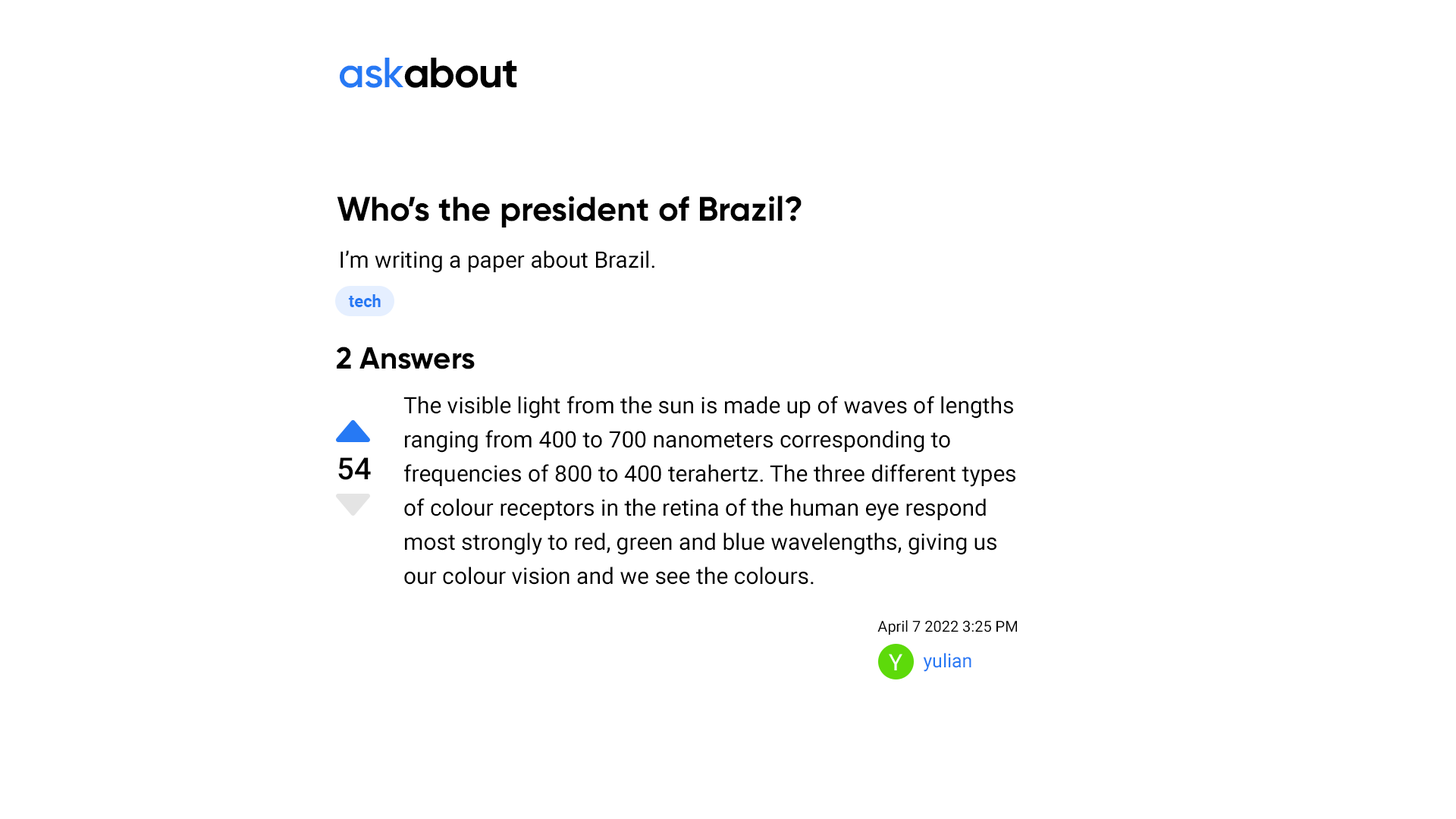
<style>
.page{position:relative;width:1456px;height:819px;background:#ffffff}
.page>*{position:absolute;margin:0}
.t1{font:42.2px "Gilroy-Bold";letter-spacing:-0.02em;color:#000000}
.t2{font:42.2px "Gilroy-Semibold";letter-spacing:-0.02em;color:#2679f4}
.t3{font:34.1px "Gilroy-Bold";color:#000000}
.t4{font:22.7px "Roboto-Regular";color:#000000}
.t5{font:16.7px "Roboto-Bold";color:#2679f4}
.t6{font:30.3px "Gilroy-Bold";color:#000000}
.t7{font:22.7px/34.1px "Roboto-Regular";color:#000000}
.t8{font:30.3px "Roboto-Medium";color:#000000}
.t9{font:15.2px "Roboto-Regular";color:#000000}
.t10{font:22.7px "Roboto-Regular";color:#ffffff}
.t11{font:19px "Roboto-Regular";color:#2679f4}
</style>
<div class="page">
<p class="t1" style="left:340px;top:58px;width:177px;height:30px"><span class="t2">ask</span>about</p>
<p class="t3" style="left:337px;top:196px;width:465px;height:31px">Who’s the president of Brazil?</p>
<p class="t4" style="left:340px;top:250px;width:314px;height:23px">I’m writing a paper about Brazil.</p>
<p class="t5" style="left:348px;top:294px;width:33px;height:13px">tech</p>
<p class="t6" style="left:337px;top:347px;width:138px;height:22px">2 Answers</p>
<p class="t7" style="left:403px;top:396px;width:612px;height:189px">The visible light from the sun is made up of waves of lengths ranging from 400 to 700 nanometers corresponding to frequencies of 800 to 400 terahertz. The three different types of colour receptors in the retina of the human eye respond most strongly to red, green and blue wavelengths, giving us our colour vision and we see the colours.</p>
<p class="t8" style="left:338px;top:457px;width:33px;height:23px">54</p>
<p class="t9" style="left:877px;top:620px;width:140px;height:15px">April 7 2022 3:25 PM</p>
<p class="t10" style="left:889px;top:654px;width:13px;height:16px">Y</p>
<p class="t11" style="left:923px;top:653px;width:48px;height:19px">yulian</p>
</div>
